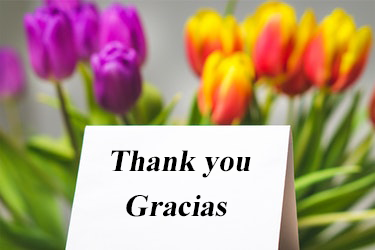
<style>
.page{position:relative;width:375px;height:250px}
.page>*{position:absolute;margin:0}
.t1{font:30.8px "TimesNewRomanPS-BoldMT";color:#000000;font-style:italic}
</style>
<div class="page">
<p class="t1" style="left:111px;top:150px;width:140px;height:28px">Thank you</p>
<p class="t1" style="left:126px;top:195px;width:101px;height:22px">Gracias</p>
</div>
